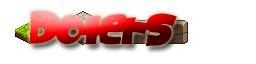
<style>
.page{position:relative;width:256px;height:64px;background:#ffffff}
.page>*{position:absolute;margin:0}
.t1{font:40px "myunta";letter-spacing:-0.1em;font-weight:bold;font-style:italic}
</style>
<div class="page">
<p class="t1" style="left:29px;top:11px;width:148px;height:35px">Doters</p>
</div>
